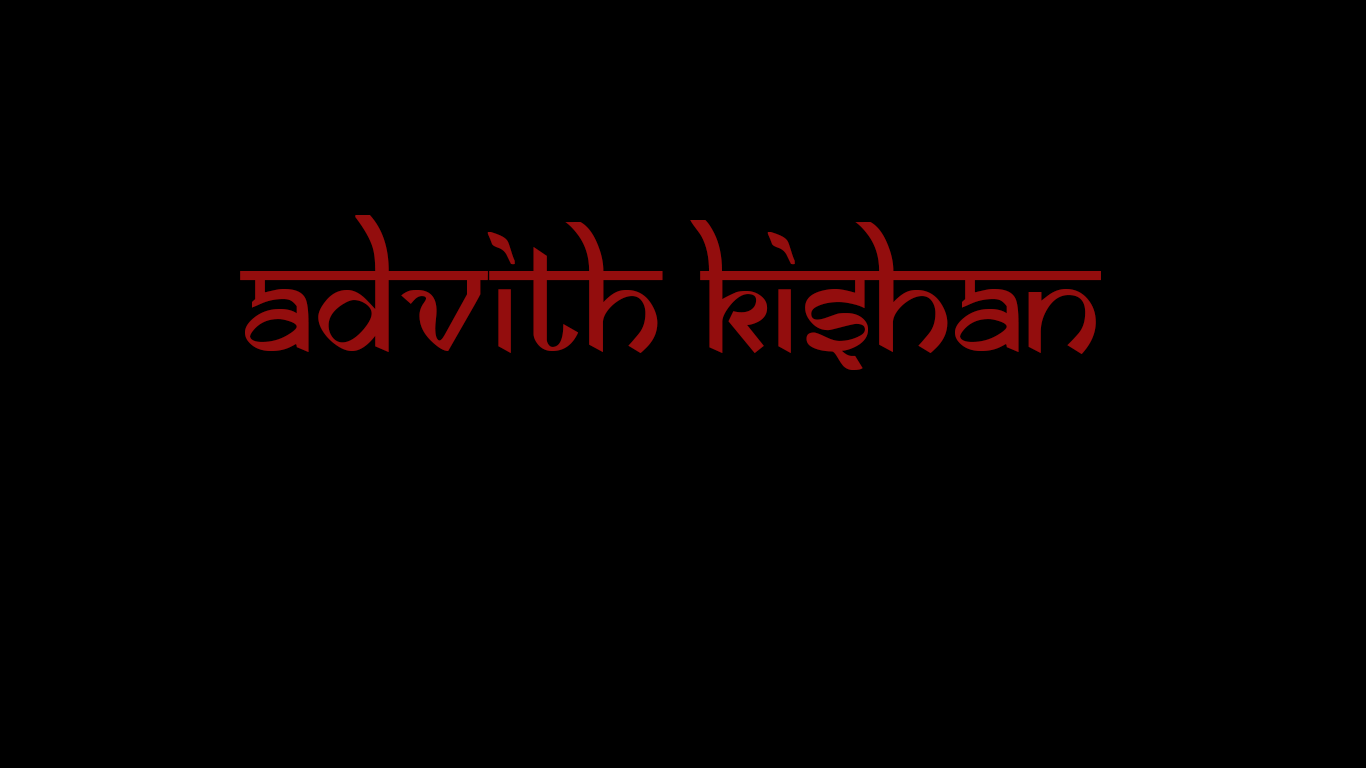
<style>
.page{position:relative;width:1366px;height:768px;background:#000000}
.page>*{position:absolute;margin:0}
.t1{font:150px "SamarkanNormal";color:#930d0d}
</style>
<div class="page">
<p class="t1" style="left:240px;top:215px;width:861px;height:155px">Advith kishan</p>
</div>
